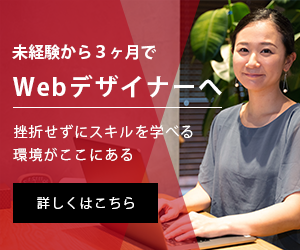
<style>
.page{position:relative;width:300px;height:250px}
.page>*{position:absolute;margin:0}
.t1{font:16px "KozGoPr6N-Bold";color:#ffffff}
.t2{font:24px "KozGoPr6N-Bold";letter-spacing:0.08em;color:#ffffff}
.t3{font:14px/22.4px "KozGoPr6N-Regular";letter-spacing:0.08em;color:#ffffff}
.t4{font:13px "KozGoPr6N-Regular";letter-spacing:0.1em;color:#ffffff}
</style>
<div class="page">
<p class="t1" style="left:12px;top:44px;width:144px;height:16px">未経験から３ヶ月で</p>
<p class="t2" style="left:13px;top:74px;width:209px;height:24px">Webデザイナーへ</p>
<p class="t3" style="left:13px;top:124px;width:180px;height:38px">挫折せずにスキルを学べる<br>環境がここにある</p>
<p class="t4" style="left:37px;top:197px;width:97px;height:12px">詳しくはこちら</p>
</div>
